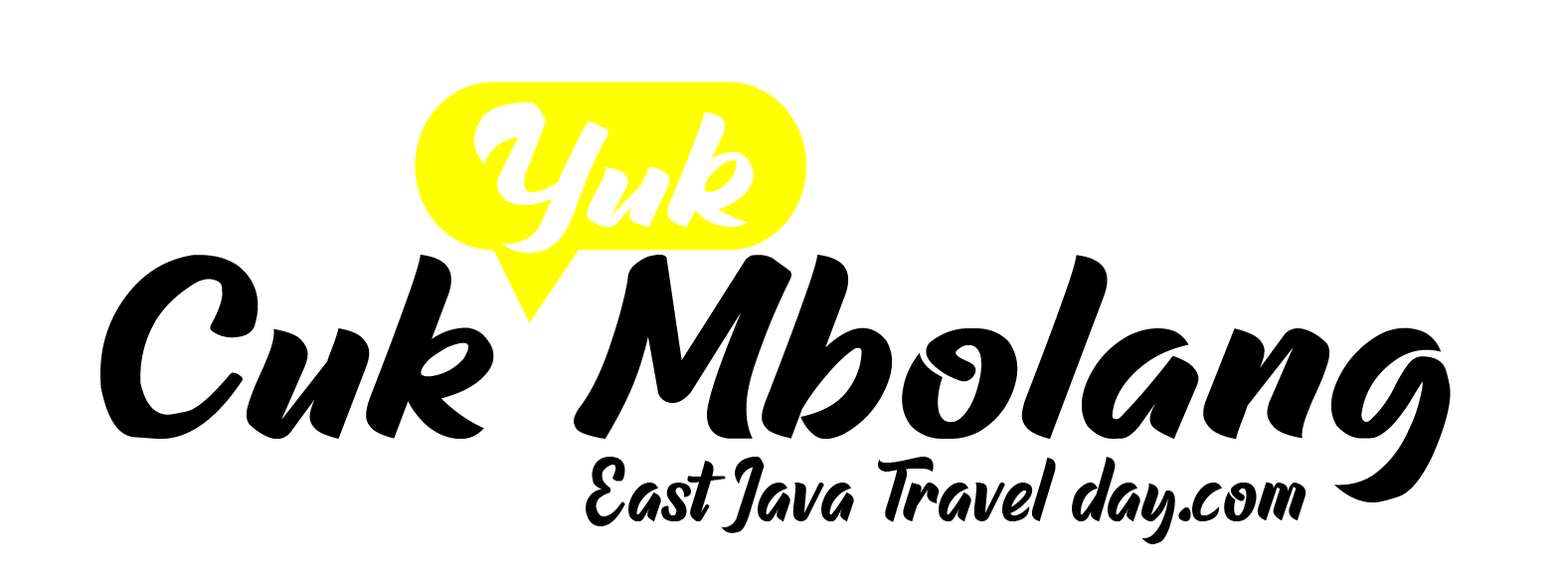
<style>
.page{position:relative;width:1568px;height:588px;background:#ffffff}
.page>*{position:absolute;margin:0}
.t1{font:176.9px "Raphtalia";color:#ffffff;scale:1.25 1}
.t2{font:263px "Raphtalia";color:#000000;scale:1.25 1}
.t3{font:91.3px "Raphtalia";color:#000000}
</style>
<div class="page">
<p class="t1" style="left:474px;top:102px;width:280px;height:152px">Yuk</p>
<p class="t2" style="left:100px;top:255px;width:1351px;height:247px">Cuk Mbolang</p>
<p class="t3" style="left:586px;top:456px;width:721px;height:88px">East Java Travel day.com</p>
</div>
